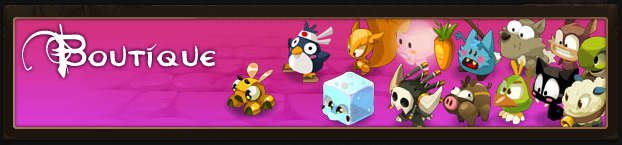
<style>
.page{position:relative;width:622px;height:145px}
.page>*{position:absolute;margin:0}
.t1{font:49px "Neverwinter";letter-spacing:0.01em;color:#ffffff}
</style>
<div class="page">
<p class="t1" style="left:22px;top:23px;width:194px;height:55px">Boutique</p>
</div>
